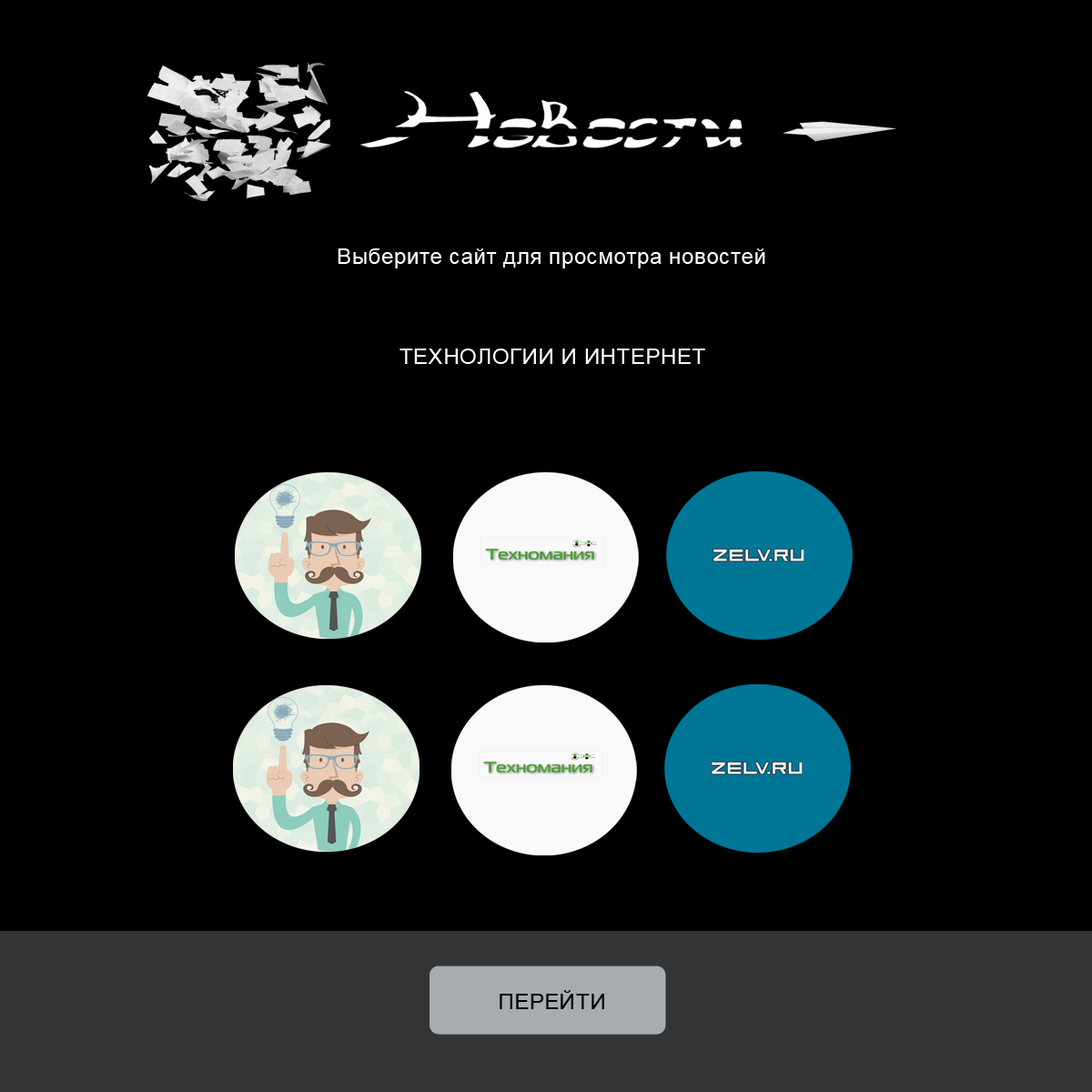
<style>
.page{position:relative;width:1092px;height:1092px;background:#000000}
.page>*{position:absolute;margin:0}
.t1{font:21.8px "ArialMT";letter-spacing:0.025em;color:#ffffff}
.t2{font:21.8px "ArialMT";letter-spacing:0.025em;color:#000000}
</style>
<div class="page">
<p class="t1" style="left:338px;top:248px;width:427px;height:20px">Выберите сайт для просмотра новостей</p>
<p class="t1" style="left:399px;top:349px;width:306px;height:15px">ТЕХНОЛОГИИ И ИНТЕРНЕТ</p>
<p class="t2" style="left:500px;top:990px;width:104px;height:19px">ПЕРЕЙТИ</p>
</div>
